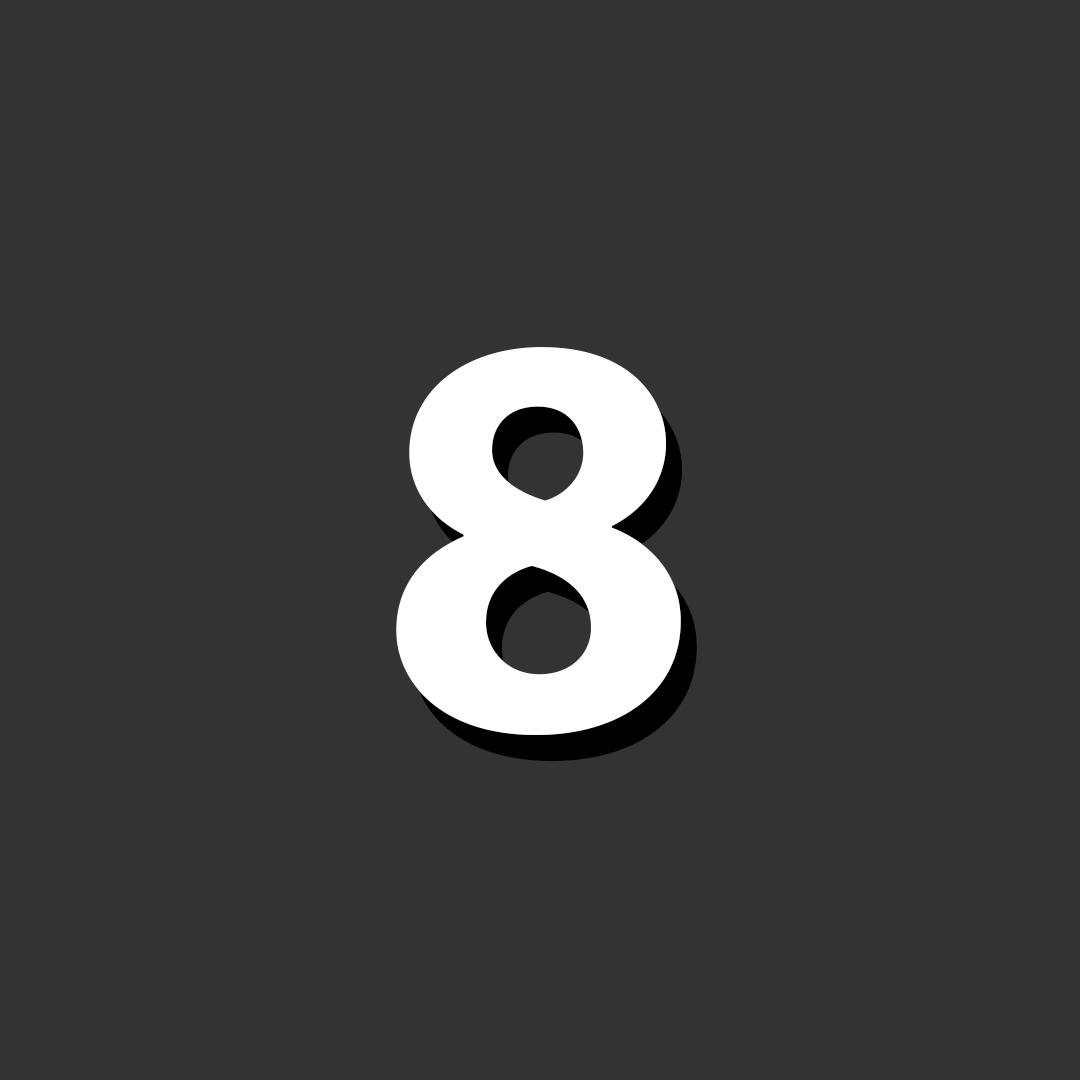
<style>
.page{position:relative;width:1080px;height:1080px;background:#333333}
.page>*{position:absolute;margin:0}
.t1{font:578.7px "MyriadPro-Bold";color:#ffffff}
</style>
<div class="page">
<p class="t1" style="left:396px;top:347px;width:285px;height:388px">8</p>
</div>
